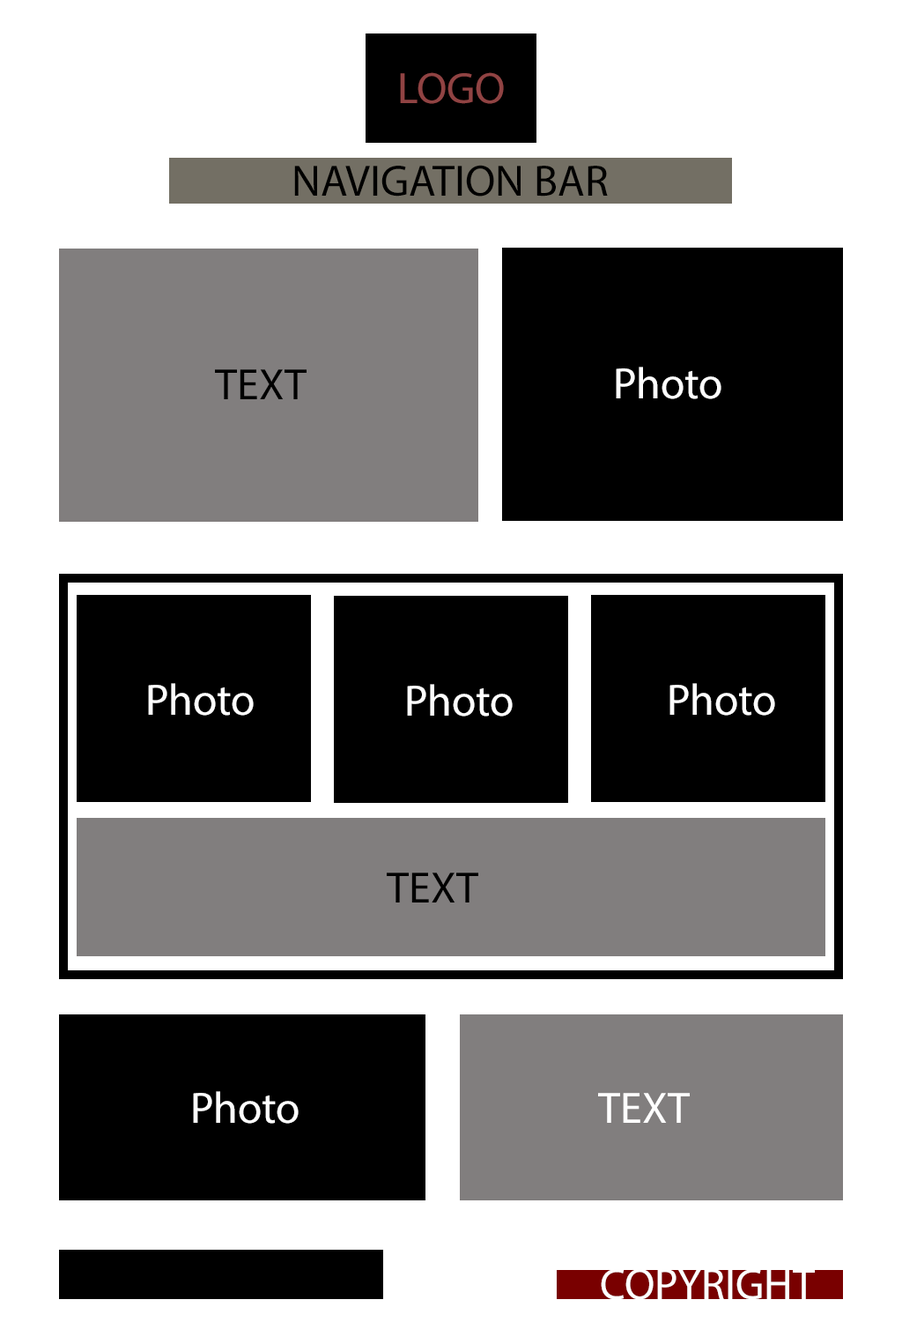
<style>
.page{position:relative;width:902px;height:1322px;background:#ffffff}
.page>*{position:absolute;margin:0}
.t1{font:44.1px "MyriadPro-Regular";color:#904343}
.t2{font:44.1px "MyriadPro-Regular";color:#000000}
.t3{font:44.1px "MyriadPro-Regular";color:#ffffff}
</style>
<div class="page">
<p class="t1" style="left:400px;top:72px;width:104px;height:32px">LOGO</p>
<p class="t2" style="left:294px;top:165px;width:314px;height:31px">NAVIGATION BAR</p>
<p class="t2" style="left:215px;top:369px;width:92px;height:30px">TEXT</p>
<p class="t3" style="left:616px;top:367px;width:106px;height:32px">Photo</p>
<p class="t3" style="left:148px;top:683px;width:106px;height:32px">Photo</p>
<p class="t3" style="left:407px;top:684px;width:106px;height:32px">Photo</p>
<p class="t3" style="left:670px;top:683px;width:105px;height:32px">Photo</p>
<p class="t2" style="left:387px;top:872px;width:91px;height:30px">TEXT</p>
<p class="t3" style="left:193px;top:1091px;width:106px;height:32px">Photo</p>
<p class="t3" style="left:598px;top:1093px;width:92px;height:30px">TEXT</p>
<p class="t3" style="left:601px;top:1268px;width:214px;height:32px">COPYRIGHT</p>
</div>
